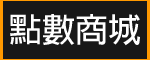
<style>
.page{position:relative;width:150px;height:60px;background:#181818}
.page>*{position:absolute;margin:0}
.t1{font:33px "AdobeFanHeitiStd-Bold";color:#ffffff}
</style>
<div class="page">
<p class="t1" style="left:10px;top:14px;width:130px;height:32px">點數商城</p>
</div>
